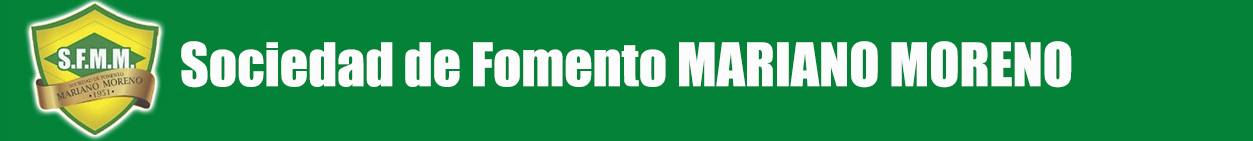
<style>
.page{position:relative;width:1253px;height:141px;background:#038238}
.page>*{position:absolute;margin:0}
.t1{font:55.6px "Impact";color:#fcfcfc}
</style>
<div class="page">
<p class="t1" style="left:181px;top:41px;width:891px;height:47px">Sociedad de Fomento MARIANO MORENO</p>
</div>
